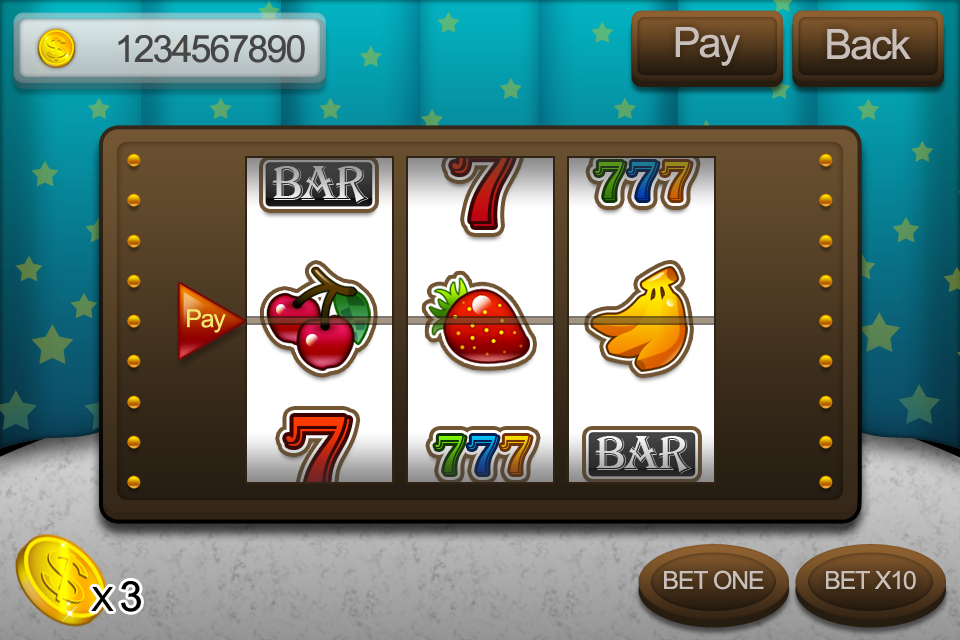
<style>
.page{position:relative;width:960px;height:640px}
.page>*{position:absolute;margin:0}
.t1{font:41.7px "ArialMT";letter-spacing:-0.05em;color:#c8bfbb}
.t2{font:37.5px "ArialMT";letter-spacing:-0.05em;color:#464646}
.t3{font:50.6px "Algerian";letter-spacing:-0.075em}
.t4{font:25px "ArialMT";letter-spacing:-0.05em;color:#f1e66e}
.t5{font:33.3px "ArialMT";letter-spacing:-0.05em;color:#000000}
.t6{font:41.7px "ArialMT";letter-spacing:-0.05em;color:#000000}
.t7{font:25px "ArialMT";letter-spacing:-0.05em;color:#c8bfbb}
</style>
<div class="page">
<p class="t1" style="left:675px;top:27px;width:65px;height:39px">Pay</p>
<p class="t1" style="left:827px;top:29px;width:84px;height:31px">Back</p>
<p class="t2" style="left:118px;top:35px;width:187px;height:28px">1234567890</p>
<p class="t3" style="left:272px;top:166px;width:97px;height:38px">bar</p>
<p class="t4" style="left:187px;top:309px;width:39px;height:24px">Pay</p>
<p class="t3" style="left:595px;top:436px;width:97px;height:38px">bar</p>
<p class="t5" style="left:91px;top:581px;width:50px;height:31px">X <span class="t6">3</span></p>
<p class="t7" style="left:664px;top:570px;width:100px;height:20px">BET ONE</p>
<p class="t7" style="left:826px;top:570px;width:90px;height:20px">BET X10</p>
</div>
